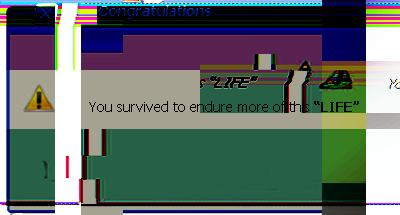
<style>
.page{position:relative;width:400px;height:215px;background:#266046}
.page>*{position:absolute;margin:0}
.t1{font:14px "Tahoma";color:#000000}
.t2{font:14px "Tahoma-Bold";color:#000000}
</style>
<div class="page">
<p class="t1" style="left:89px;top:101px;width:270px;height:11px">You survived to endure more of this <span class="t2">“LIFE”</span></p>
</div>
